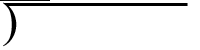
<style>
.page{position:relative;width:200px;height:50px;background:#ffffff}
.page>*{position:absolute;margin:0}
.t1{font:48px "TimesNewRomanPSMT";color:#000000}
</style>
<div class="page">
<p class="t1" style="left:3px;top:2px;width:14px;height:45px">)</p>
</div>
